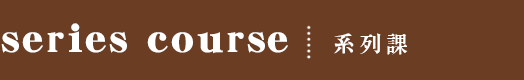
<style>
.page{position:relative;width:524px;height:80px;background:#6b3d23}
.page>*{position:absolute;margin:0}
.t1{font:42.8px "DFMing-W14-WINP-BF";letter-spacing:0.05em;color:#ffffff}
.t2{font:35.7px "DFMing-W12-WINP-BF";letter-spacing:0.2em;color:#000000}
.t3{font:22px "DFMing-XB-WIN-BF";letter-spacing:0.2em;color:#ffffff}
</style>
<div class="page">
<p class="t1" style="left:1px;top:23px;width:407px;height:32px"><span class="t2">  </span>series course  <span class="t3">系列課</span></p>
</div>
